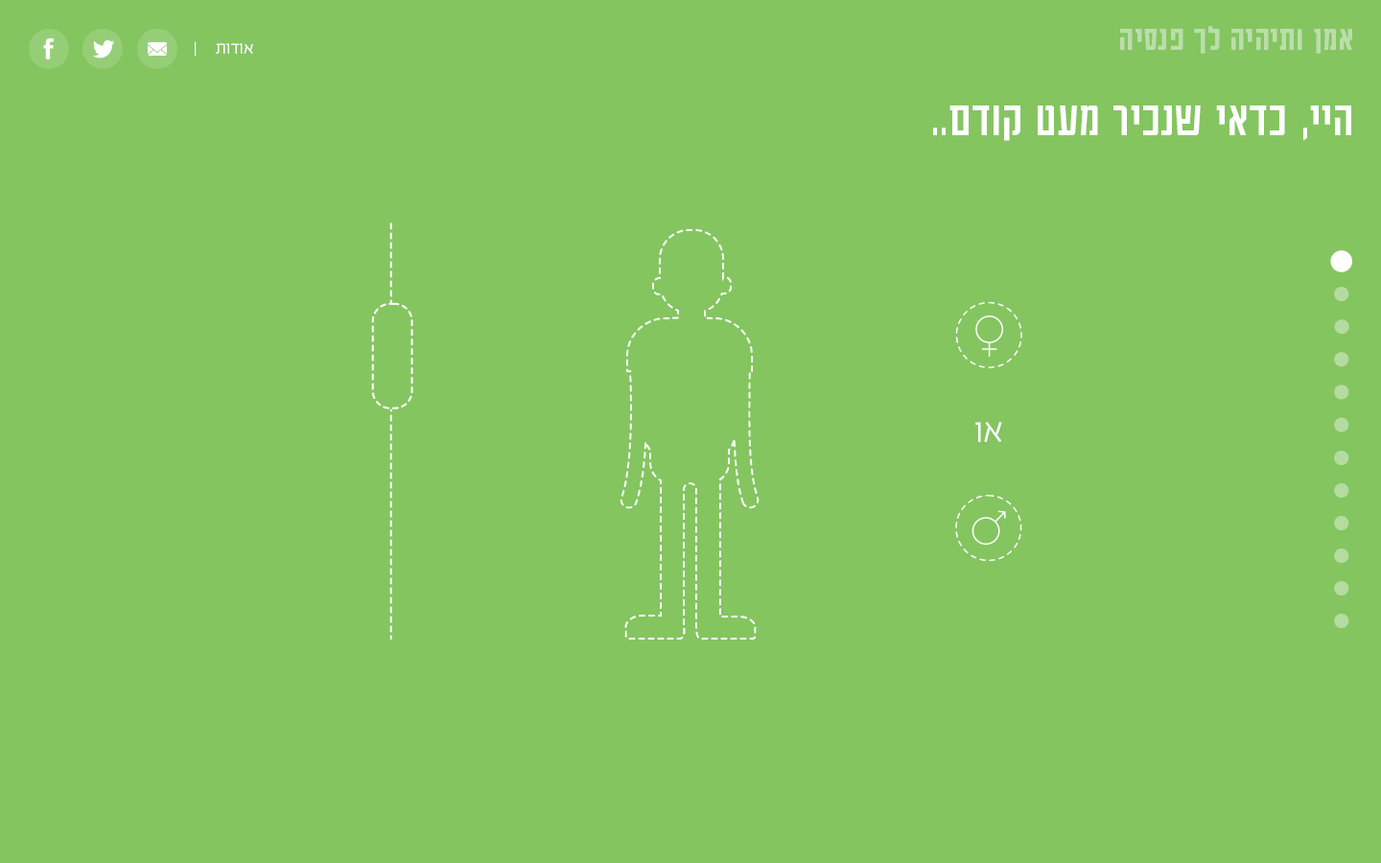
<style>
.page{position:relative;width:1381px;height:863px;background:#84c560}
.page>*{position:absolute;margin:0}
.t1{font:37.8px "AdumaFOT-Medium";color:#bbddab}
.t2{font:19.2px "EzerBlock_OE-Light";color:#ffffff}
.t3{font:53.8px "AdumaFOT-Regular";color:#ffffff}
.t4{font:38.4px "EzerBlock_OE-Light";color:#ffffff}
</style>
<div class="page">
<p class="t1" style="left:1120px;top:26px;width:232px;height:28px">אמן ותיהיה לך פנסיה</p>
<p class="t2" style="left:195px;top:41px;width:58px;height:16px">אודות     |</p>
<p class="t3" style="left:933px;top:106px;width:419px;height:35px">היי, כדאי שנכיר מעט קודם..</p>
<p class="t4" style="left:976px;top:422px;width:26px;height:20px">או</p>
</div>
